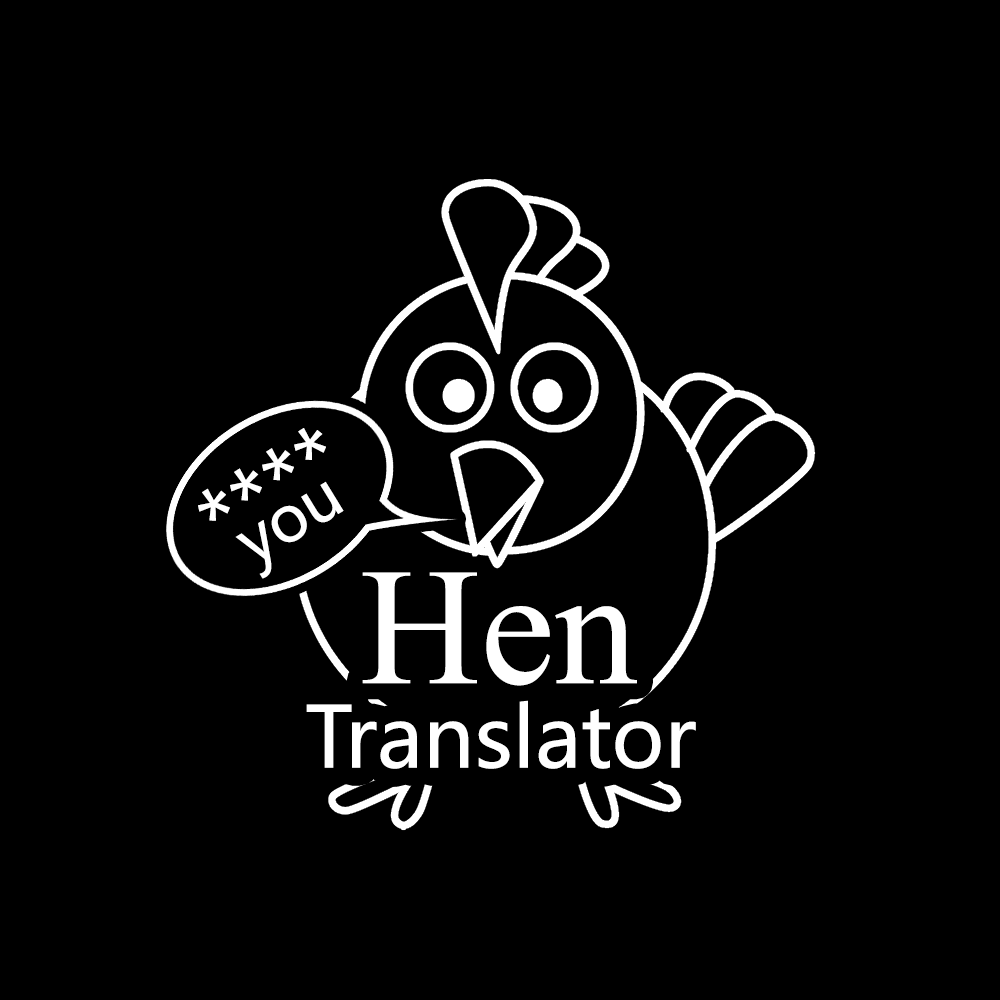
<style>
.page{position:relative;width:1000px;height:1000px;background:#000000}
.page>*{position:absolute;margin:0}
.t1{font:83.3px "MicrosoftYaHei";color:#ffffff}
.t2{font:62.5px "MicrosoftYaHei";color:#ffffff}
.t3{font:166.7px "TimesNewRomanPSMT";color:#ffffff}
</style>
<div class="page">
<p class="t1" style="left:198px;top:428px;width:128px;height:93px;rotate:-32deg">****</p>
<p class="t2" style="left:235px;top:481px;width:109px;height:98px;rotate:-32deg">you</p>
<p class="t3" style="left:362px;top:572px;width:275px;height:114px">Hen</p>
<p class="t1" style="left:306px;top:700px;width:390px;height:69px">Translator</p>
</div>
